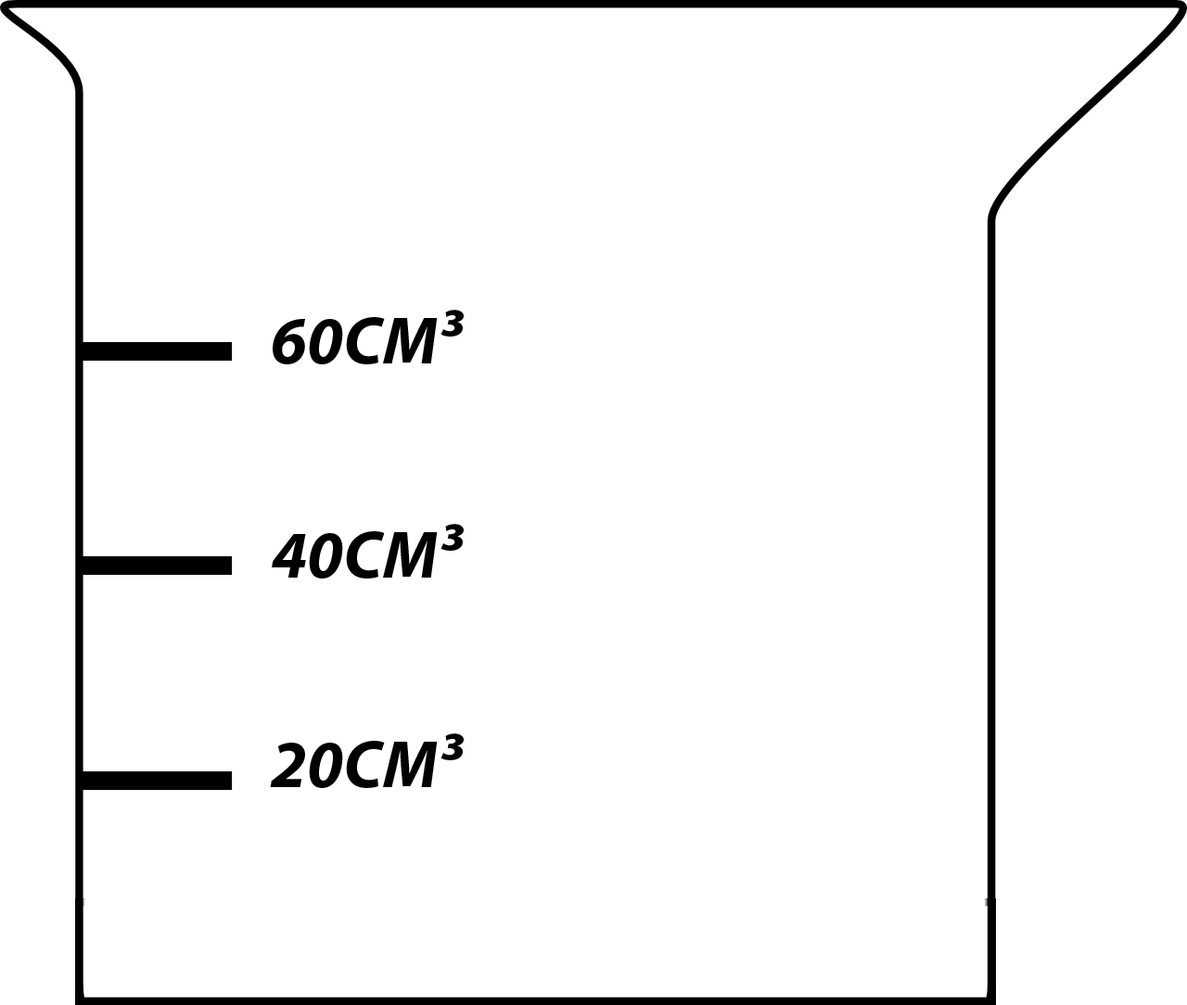
<style>
.page{position:relative;width:1187px;height:1005px;background:#ffffff}
.page>*{position:absolute;margin:0}
.t1{font:66.7px "MyriadPro-BoldIt";color:#000000}
</style>
<div class="page">
<p class="t1" style="left:273px;top:310px;width:191px;height:54px">60CM³</p>
<p class="t1" style="left:272px;top:524px;width:192px;height:54px">40CM³</p>
<p class="t1" style="left:270px;top:733px;width:194px;height:55px">20CM³</p>
</div>
